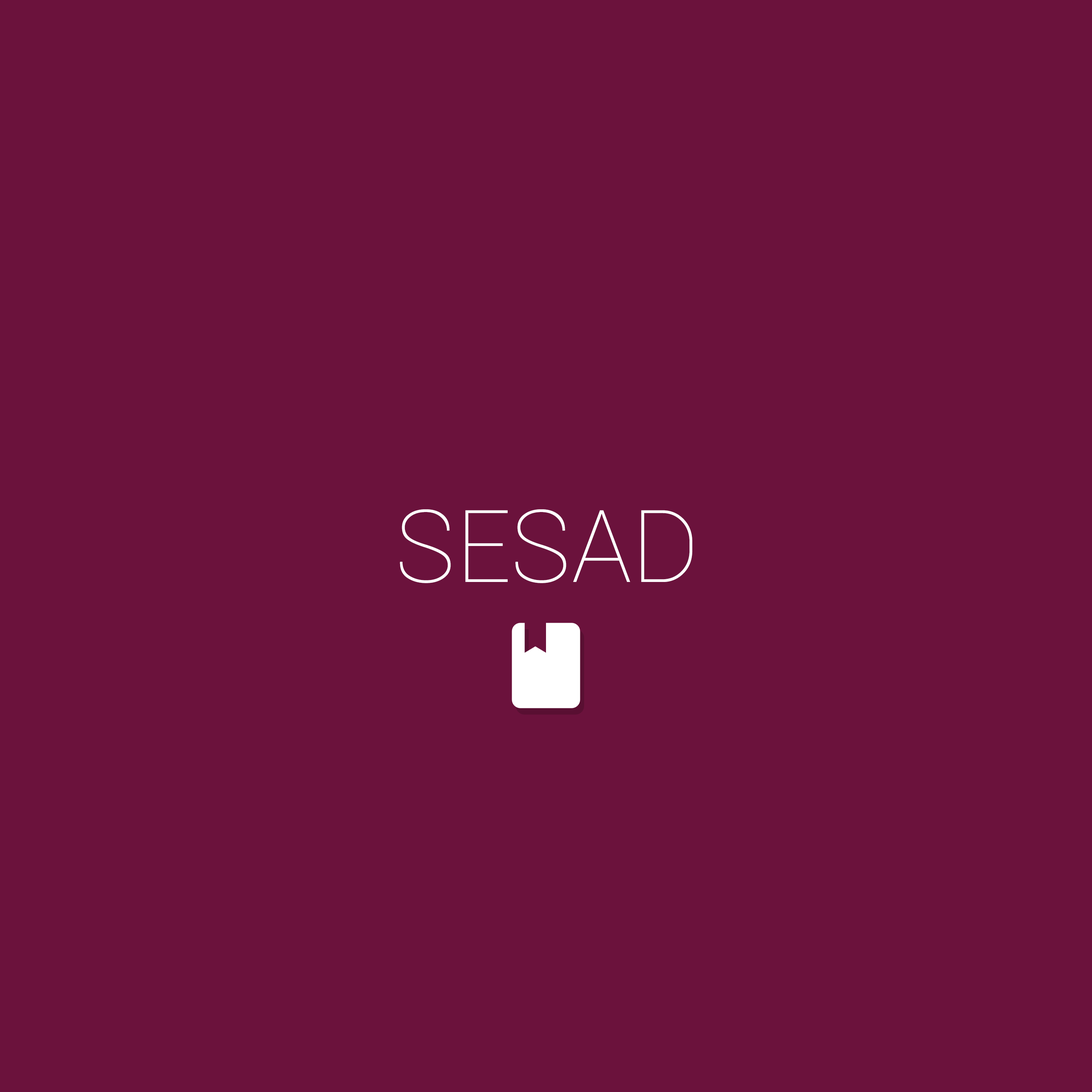
<style>
.page{position:relative;width:1092px;height:1092px;background:#6b123c}
.page>*{position:absolute;margin:0}
.t1{font:100.7px "Roboto-Thin";color:#ffffff}
</style>
<div class="page">
<p class="t1" style="left:400px;top:509px;width:292px;height:74px">SESAD</p>
</div>
